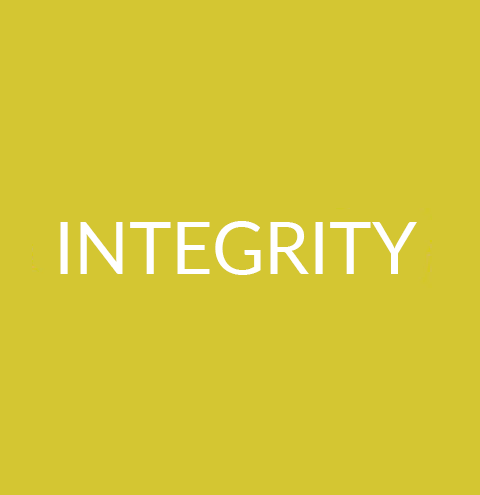
<style>
.page{position:relative;width:480px;height:495px;background:#d4c632}
.page>*{position:absolute;margin:0}
.t1{font:72px "Lato-Regular";color:#ffffff}
</style>
<div class="page">
<p class="t1" style="left:60px;top:221px;width:357px;height:54px">INTEGRITY</p>
</div>
